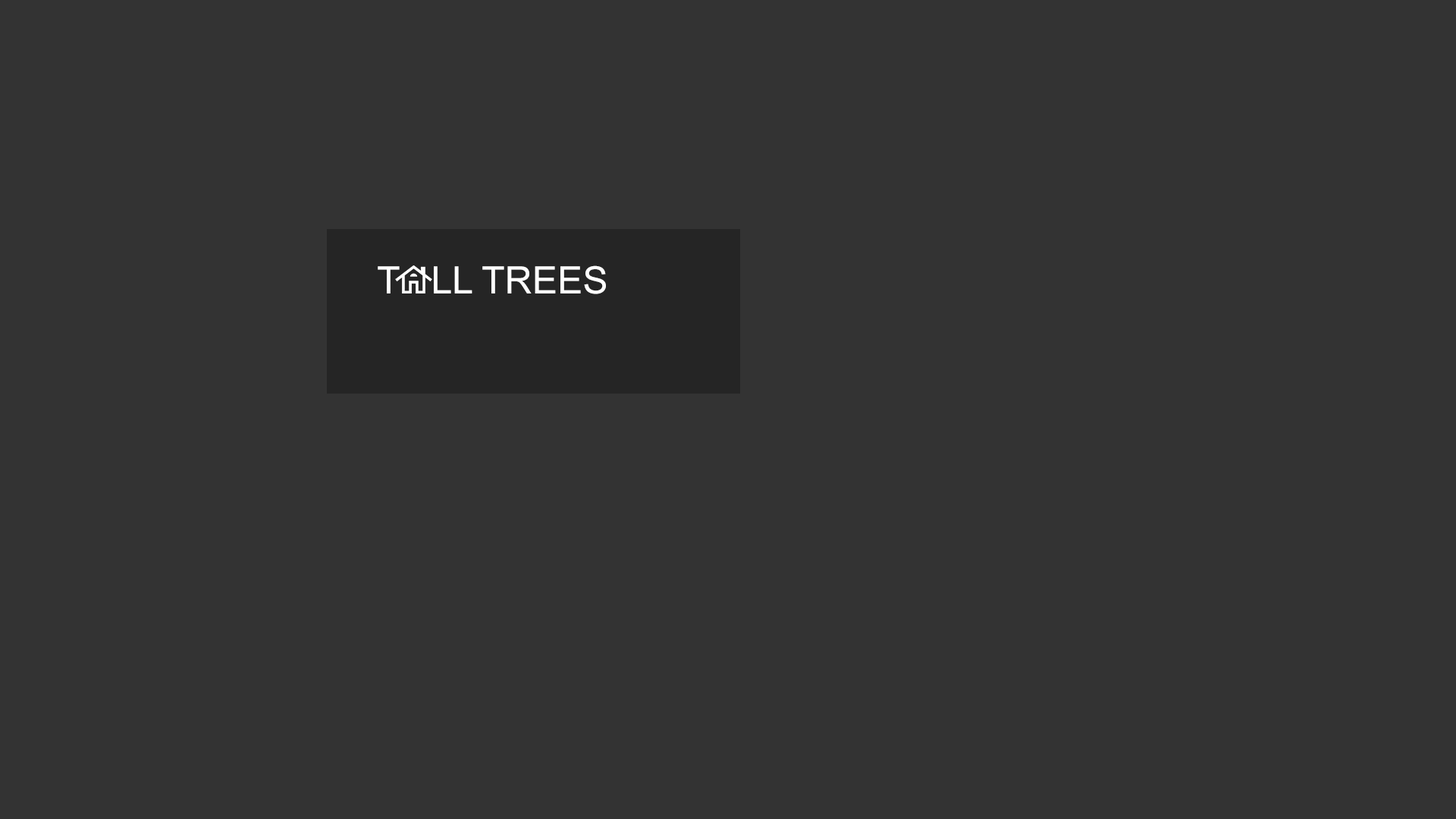
<style>
.page{position:relative;width:1456px;height:819px;background:#333333}
.page>*{position:absolute;margin:0}
.t1{font:37.9px "ArialMT";color:#ffffff}
</style>
<div class="page">
<p class="t1" style="left:378px;top:265px;width:228px;height:29px">T   LL TREES</p>
</div>
